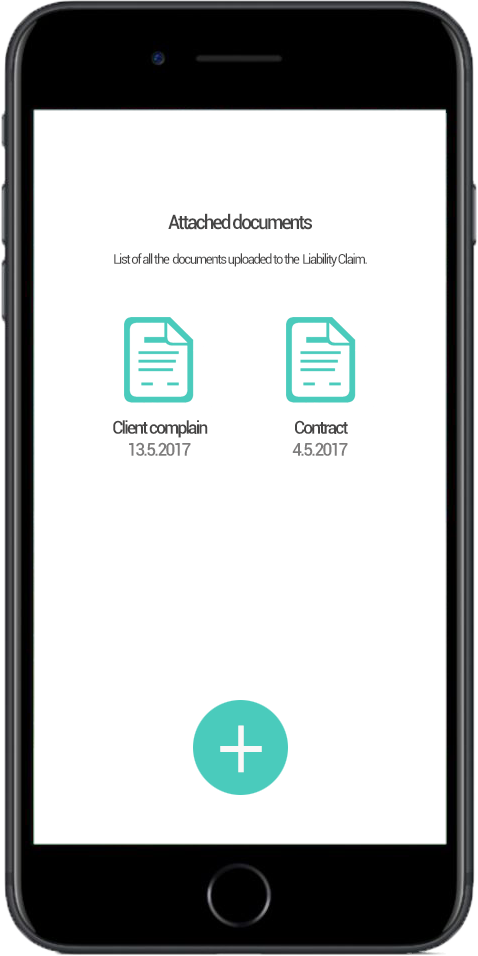
<style>
.page{position:relative;width:478px;height:956px;background:#ffffff}
.page>*{position:absolute;margin:0}
.t1{font:20px "Roboto-Medium";letter-spacing:-0.1em;color:#464545;scale:0.95 1}
.t2{font:13.6px "Roboto-Regular";letter-spacing:-0.1em;color:#464545;scale:0.95 1}
.t3{font:18.1px "Roboto-Medium";letter-spacing:-0.1em;color:#464545;scale:0.95 1}
.t4{font:18.1px "Roboto-Medium";letter-spacing:-0.1em;color:#7e7d7d;scale:0.95 1}
.t5{font:90.4px "AvenirNext-Regular";letter-spacing:-0.1em;color:#faf8f8;font-weight:bold;scale:0.88 1}
</style>
<div class="page">
<p class="t1" style="left:168px;top:213px;width:144px;height:17px">Attached documents</p>
<p class="t2" style="left:114px;top:253px;width:253px;height:14px">List of all the  documents uploaded to the  Liability Claim.</p>
<p class="t3" style="left:113px;top:420px;width:95px;height:18px">Client complain</p>
<p class="t3" style="left:295px;top:420px;width:53px;height:14px">Contract</p>
<p class="t4" style="left:129px;top:442px;width:62px;height:14px">13.5.2017</p>
<p class="t4" style="left:292px;top:442px;width:56px;height:14px">4.5.2017</p>
<p class="t5" style="left:220px;top:725px;width:42px;height:48px">+</p>
</div>
